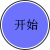
<style>
.page{position:relative;width:50px;height:50px;background:#6d72fc}
.page>*{position:absolute;margin:0}
.t1{font:12px "NSimSun"}
</style>
<div class="page">
<p class="t1" style="left:14px;top:19px;width:24px;height:12px">开始</p>
</div>
